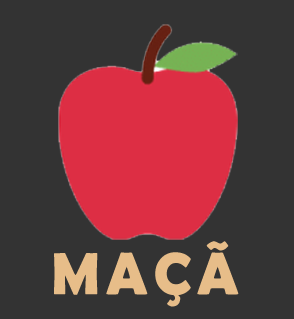
<style>
.page{position:relative;width:294px;height:319px;background:#333333}
.page>*{position:absolute;margin:0}
.t1{font:60px "BerlinSansFBDemi-Bold";letter-spacing:0.1em;color:#e7bd89}
</style>
<div class="page">
<p class="t1" style="left:54px;top:241px;width:185px;height:66px">MAÇÃ</p>
</div>
